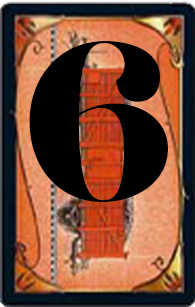
<style>
.page{position:relative;width:195px;height:307px}
.page>*{position:absolute;margin:0}
.t1{font:224px "Lust-Regular";color:#000000}
</style>
<div class="page">
<p class="t1" style="left:29px;top:41px;width:139px;height:161px">6</p>
</div>
